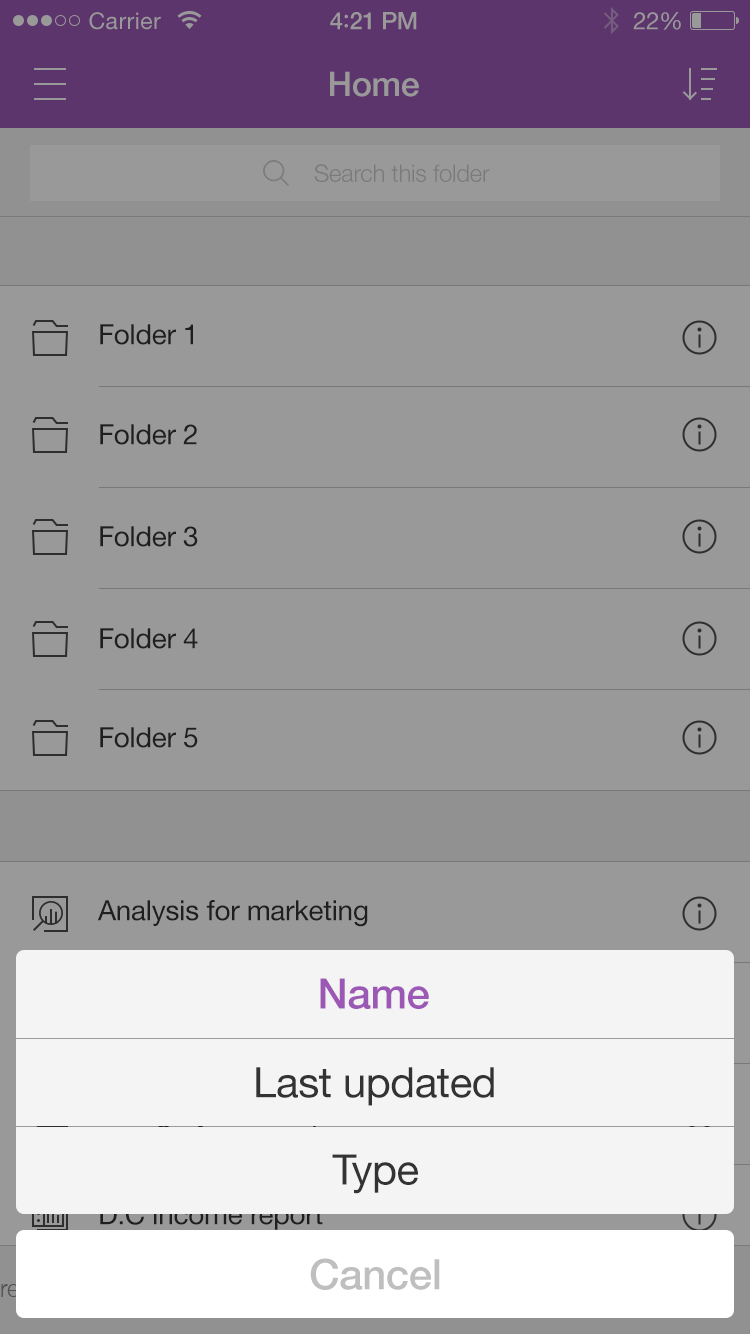
<style>
.page{position:relative;width:750px;height:1334px;background:#999999}
.page>*{position:absolute;margin:0}
.t1{font:23px "HelveticaNeue";letter-spacing:0.02em;color:#999999}
.t2{font:24px "HelveticaNeue-Medium";letter-spacing:-0.02em;color:#999999}
.t3{font:26px "Avenir-Medium";letter-spacing:-0.02em;color:#999999}
.t4{font:24px "HelveticaNeue";letter-spacing:-0.02em;color:#999999}
.t5{font:34px "HelveticaNeue-Medium";letter-spacing:-0.01em;color:#999999}
.t6{font:24px "HelveticaNeue-Light";letter-spacing:-0.01em;color:#7a7a7a}
.t7{font:28px "HelveticaNeue";letter-spacing:-0.01em;color:#333333}
.t8{font:42px "HelveticaNeue-Medium";letter-spacing:-0.01em;color:#9b58b5}
.t9{font:42px "HelveticaNeue";letter-spacing:-0.01em;color:#333333}
.t10{font:42px "HelveticaNeue-Medium";letter-spacing:-0.01em;color:#bfbfbf}
</style>
<div class="page">
<p class="t1" style="left:89px;top:12px;width:72px;height:18px">Carrier</p>
<p class="t2" style="left:330px;top:12px;width:87px;height:18px">4<span class="t3">:</span>21 PM</p>
<p class="t4" style="left:633px;top:12px;width:48px;height:18px">22%</p>
<p class="t5" style="left:330px;top:71px;width:89px;height:26px">Home</p>
<p class="t6" style="left:314px;top:164px;width:176px;height:18px">Search this folder</p>
<p class="t7" style="left:100px;top:324px;width:93px;height:21px">Folder 1</p>
<p class="t7" style="left:100px;top:424px;width:97px;height:21px">Folder 2</p>
<p class="t7" style="left:100px;top:526px;width:98px;height:21px">Folder 3</p>
<p class="t7" style="left:100px;top:628px;width:98px;height:21px">Folder 4</p>
<p class="t7" style="left:100px;top:727px;width:98px;height:21px">Folder 5</p>
<p class="t7" style="left:97px;top:900px;width:271px;height:27px">Analysis for marketing</p>
<p class="t8" style="left:320px;top:978px;width:109px;height:31px">Name</p>
<p class="t9" style="left:256px;top:1067px;width:238px;height:39px">Last updated</p>
<p class="t9" style="left:332px;top:1154px;width:86px;height:40px">Type</p>
<p class="t7" style="left:100px;top:1203px;width:223px;height:27px">D.C income report</p>
<p class="t10" style="left:310px;top:1258px;width:130px;height:32px">Cancel</p>
</div>
